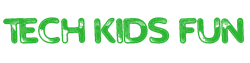
<style>
.page{position:relative;width:250px;height:63px;background:#ffffff}
.page>*{position:absolute;margin:0}
.t1{font:34px "NeonTech";color:#2cb532}
</style>
<div class="page">
<p class="t1" style="left:3px;top:17px;width:241px;height:27px">TECH KIDS FUN</p>
</div>
